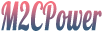
<style>
.page{position:relative;width:102px;height:32px;background:#ffffff}
.page>*{position:absolute;margin:0}
.t1{font:38.7px "Lobster-Regular";letter-spacing:0.03em;scale:0.59 1}
</style>
<div class="page">
<p class="t1" style="left:1px;top:1px;width:101px;height:30px">M2CPower</p>
</div>
